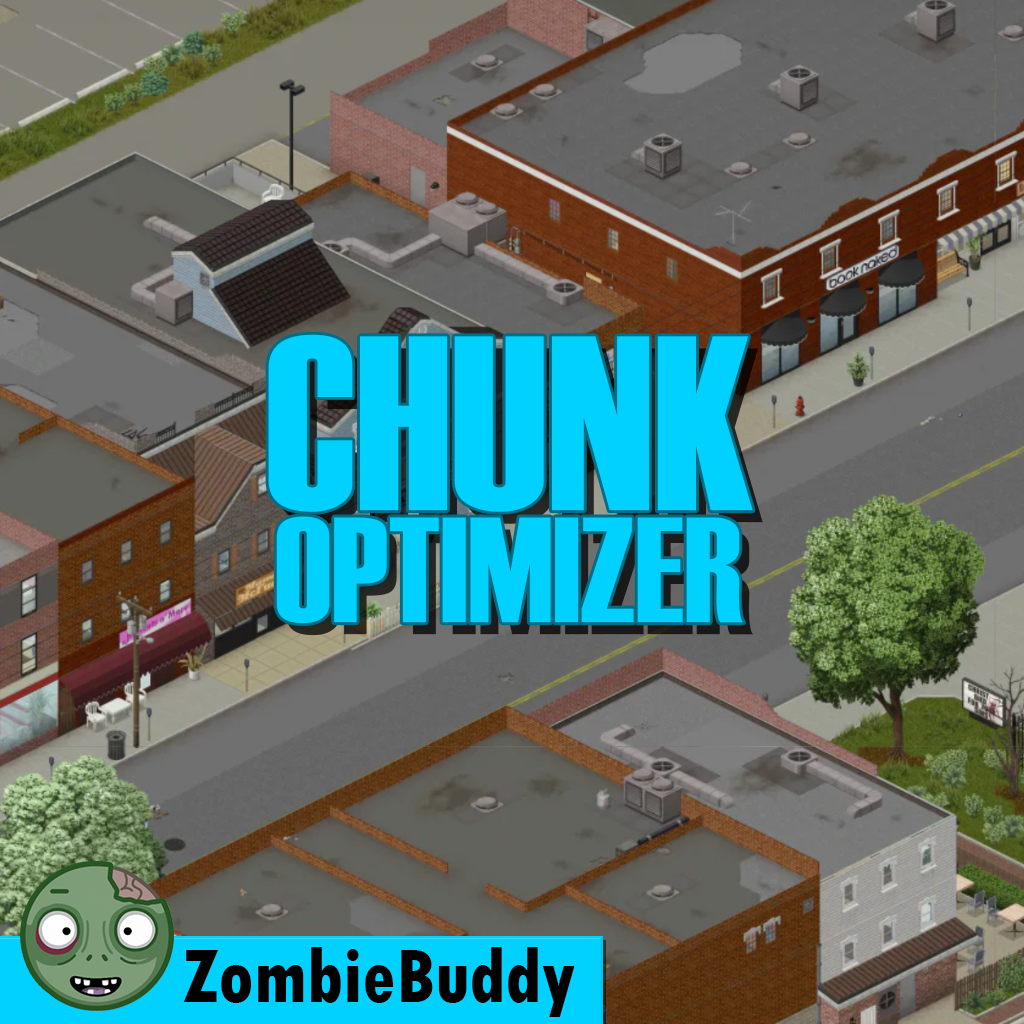
<style>
.page{position:relative;width:1024px;height:1024px}
.page>*{position:absolute;margin:0}
.t1{font:149.5px/112px "Haettenschweiler";color:#00d1ff}
.t2{font:248.2px/209.5px "Haettenschweiler";color:#00d1ff}
.t3{font:80.4px "TwCenMT-CondensedExtraBold";color:#000000;scale:0.95 1}
</style>
<div class="page">
<p class="t1" style="left:268px;top:334px;width:485px;height:290px;text-align:center"><span class="t2">CHUNK<br></span>OPTIMIZER</p>
<p class="t3" style="left:183px;top:947px;width:392px;height:70px">ZombieBuddy</p>
</div>
